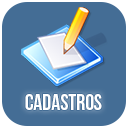
<style>
.page{position:relative;width:128px;height:128px;background:#446d95}
.page>*{position:absolute;margin:0}
.t1{font:22px "BebasNeue";color:#ffffff}
</style>
<div class="page">
<p class="t1" style="left:25px;top:94px;width:77px;height:16px">cadastros</p>
</div>
